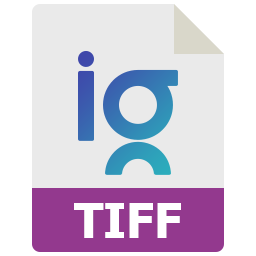
<style>
.page{position:relative;width:256px;height:256px;background:#eaeaea}
.page>*{position:absolute;margin:0}
.t1{font:48px "Tahoma-Bold";color:#ffffff}
</style>
<div class="page">
<p class="t1" style="left:74px;top:203px;width:107px;height:35px">TIFF</p>
</div>
